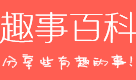
<style>
.page{position:relative;width:136px;height:80px;background:#ff5e52}
.page>*{position:absolute;margin:0}
.t1{font:34px "huxiaobo-meixin";color:#ffffff}
.t2{font:18px "--";color:#ffffff}
</style>
<div class="page">
<p class="t1" style="left:0px;top:11px;width:137px;height:33px">趣事百科</p>
<p class="t1" style="left:0px;top:11px;width:137px;height:33px">趣事百科</p>
<p class="t2" style="left:2px;top:54px;width:131px;height:16px">分享些有趣的事！</p>
</div>
